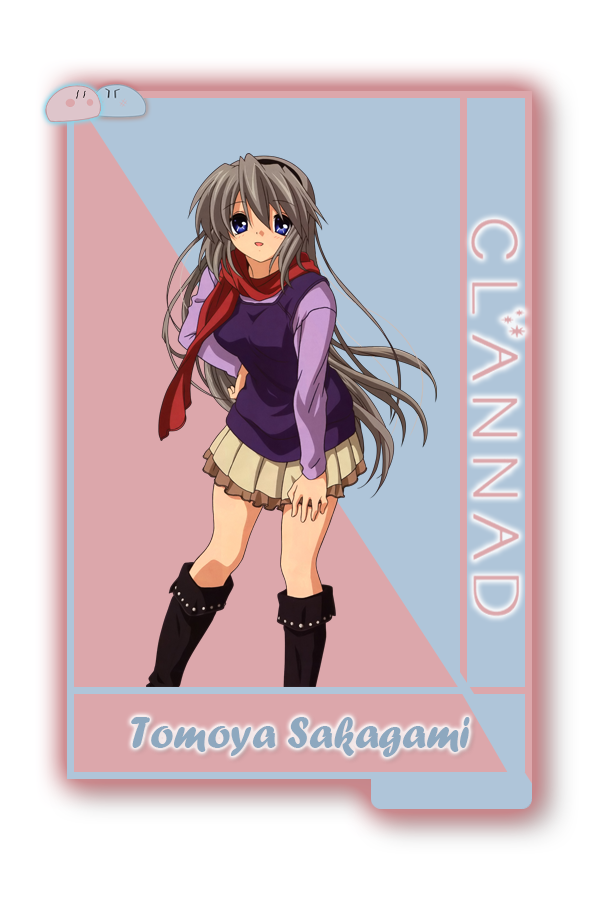
<style>
.page{position:relative;width:600px;height:900px;background:#dca7ab}
.page>*{position:absolute;margin:0}
.t1{font:45.8px "ForteMT";color:#8ea8bf;scale:0.94 1}
</style>
<div class="page">
<p class="t1" style="left:131px;top:717px;width:339px;height:40px">Tomoya Sakagami</p>
</div>
